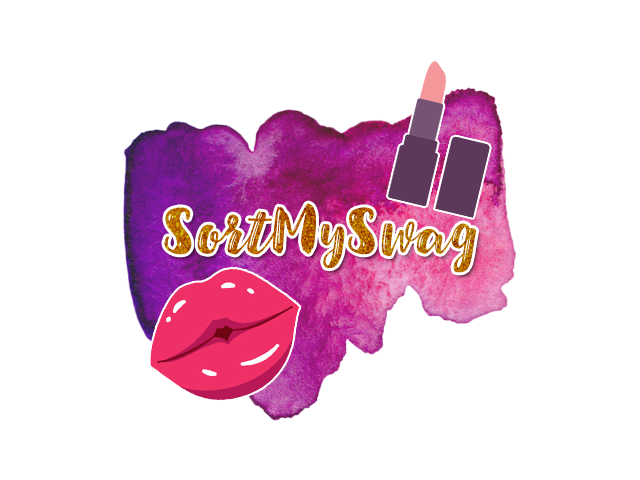
<style>
.page{position:relative;width:640px;height:480px;background:#ffffff}
.page>*{position:absolute;margin:0}
.t1{font:60px "Jullian-Regular";letter-spacing:0.005em}
</style>
<div class="page">
<p class="t1" style="left:164px;top:203px;width:312px;height:70px">SortMySwag</p>
</div>
